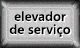
<style>
.page{position:relative;width:80px;height:48px}
.page>*{position:absolute;margin:0}
.t1{font:13px/13px "SegoeUI-Semibold";letter-spacing:0.009em;color:#000000}
</style>
<div class="page">
<p class="t1" style="left:9px;top:11px;width:62px;height:26px;text-align:center">elevador<br>de serviço</p>
</div>
